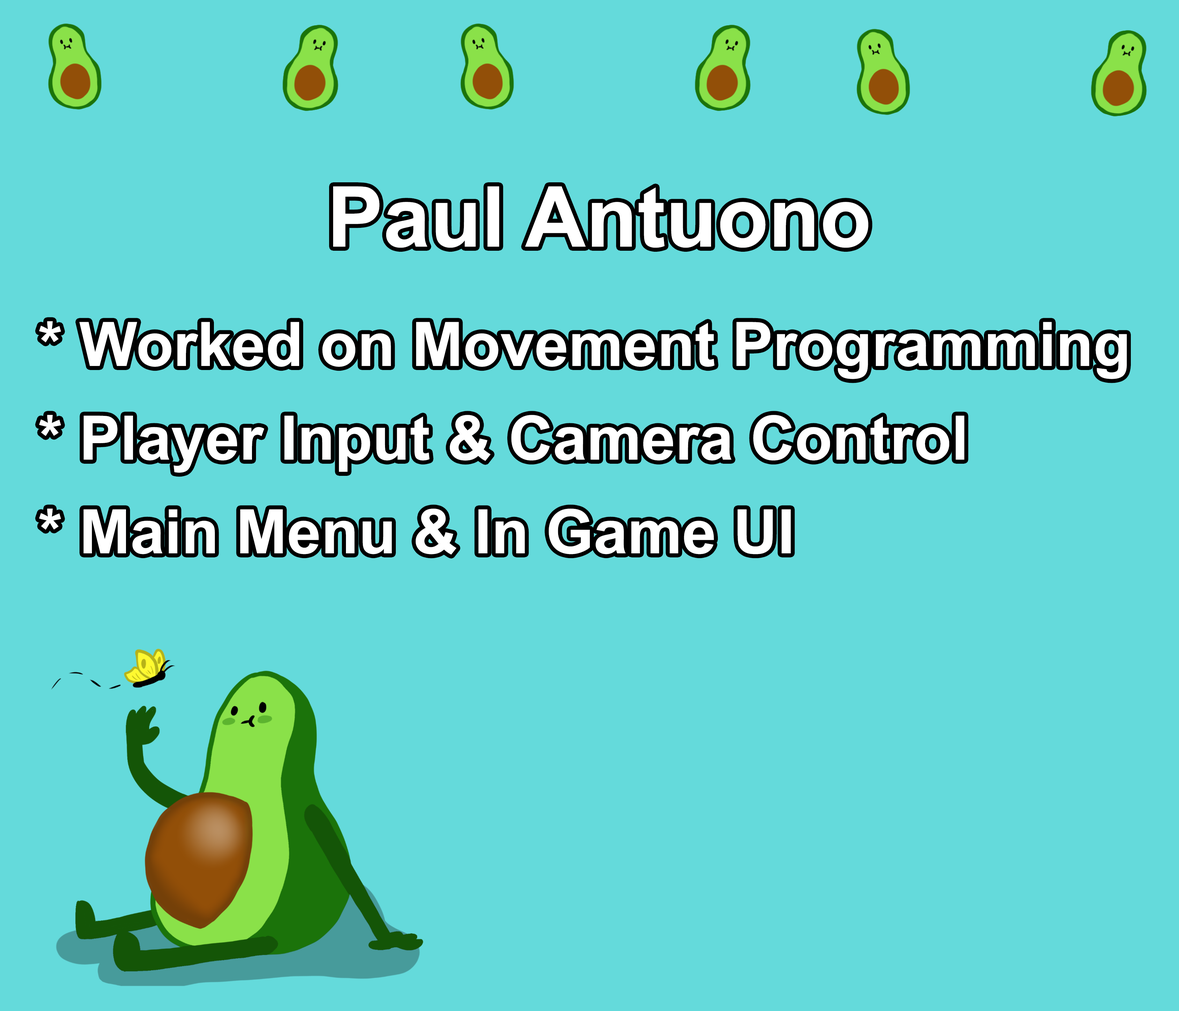
<style>
.page{position:relative;width:1179px;height:1011px;background:#64dadb}
.page>*{position:absolute;margin:0}
.t1{font:84.2px "Arial-BoldMT";color:#ffffff}
.t2{font:61.3px/46.8px "Arial-BoldMT";color:#ffffff}
</style>
<div class="page">
<p class="t1" style="left:333px;top:186px;width:536px;height:62px">Paul Antuono</p>
<p class="t2" style="left:39px;top:321px;width:1088px;height:234px">* Worked on Movement Programming<br><br>* Player Input &amp; Camera Control<br><br>* Main Menu &amp; In Game UI</p>
</div>
